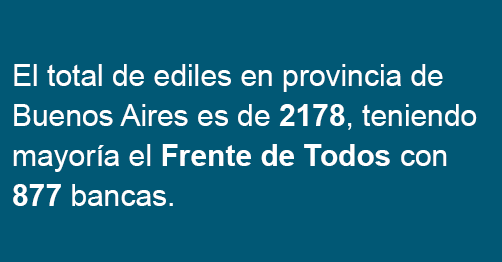
<style>
.page{position:relative;width:502px;height:262px;background:#015875}
.page>*{position:absolute;margin:0}
.t1{font:30px/40px "ArialMT";color:#ffffff}
.t2{font:30px/40px "Arial-BoldMT";color:#ffffff}
</style>
<div class="page">
<p class="t1" style="left:13px;top:64px;width:464px;height:142px">El total de ediles en provincia de Buenos Aires es de <span class="t2">2178</span>, teniendo mayoría el <span class="t2">Frente de Todos</span> con <span class="t2">877 </span>bancas.</p>
</div>
